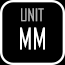
<style>
.page{position:relative;width:65px;height:65px;background:#000000}
.page>*{position:absolute;margin:0}
.t1{font:16.8px "AgencyFB-Reg";color:#aeaeae}
.t2{font:28.4px "AgencyFB-Reg";color:#ffffff}
</style>
<div class="page">
<p class="t1" style="left:21px;top:8px;width:23px;height:14px">UNIT</p>
<p class="t2" style="left:20px;top:27px;width:25px;height:23px">MM</p>
</div>
